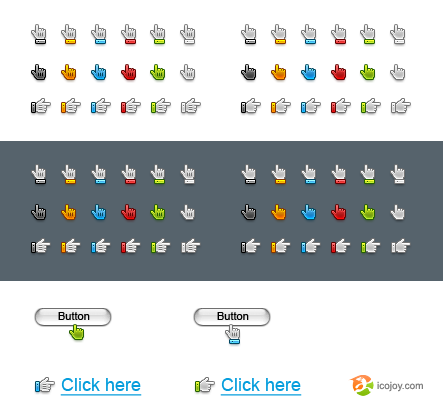
<style>
.page{position:relative;width:443px;height:417px;background:#ffffff}
.page>*{position:absolute;margin:0}
.t1{font:11px "ArialMT";color:#000000}
.t2{font:18px "ArialMT";color:#069edd;text-decoration:underline}
</style>
<div class="page">
<p class="t1" style="left:58px;top:312px;width:32px;height:8px">Button</p>
<p class="t1" style="left:217px;top:312px;width:32px;height:8px">Button</p>
<p class="t2" style="left:60px;top:378px;width:82px;height:18px">Click here</p>
<p class="t2" style="left:220px;top:378px;width:82px;height:18px">Click here</p>
</div>
